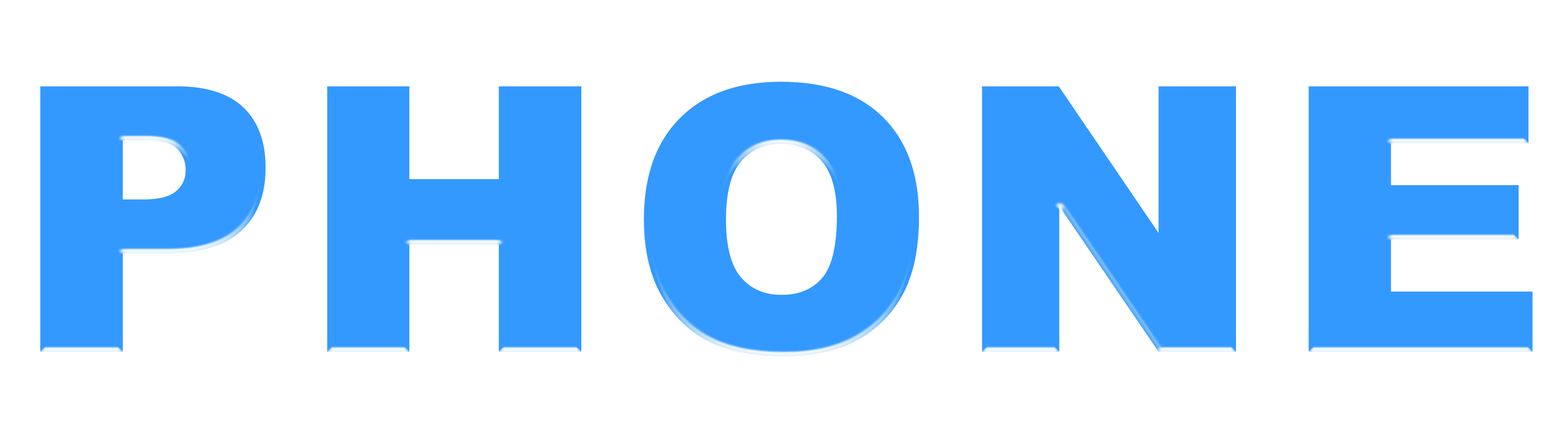
<style>
.page{position:relative;width:1568px;height:441px;background:#ffffff}
.page>*{position:absolute;margin:0}
.t1{font:370.7px "Arial-Black";letter-spacing:0.05em;color:#3399ff}
</style>
<div class="page">
<p class="t1" style="left:40px;top:82px;width:1493px;height:274px">PHONE</p>
</div>
